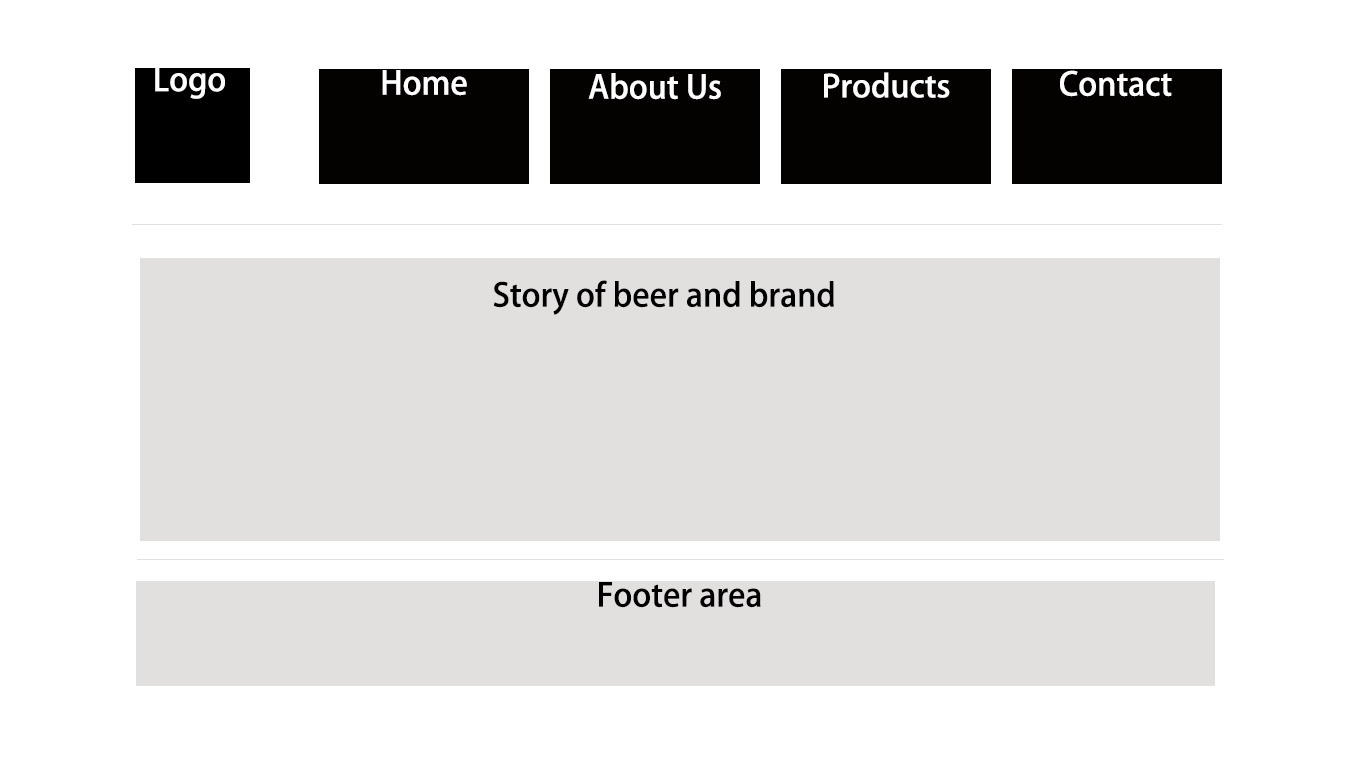
<style>
.page{position:relative;width:1366px;height:768px;background:#ffffff}
.page>*{position:absolute;margin:0}
.t1{font:32px "AdobeHeitiStd-Regular";color:#fffefe}
.t2{font:32px "AdobeHeitiStd-Regular";color:#ffffff}
.t3{font:30.7px "AdobeHeitiStd-Regular";color:#ffffff;scale:1.04 1}
.t4{font:32px "AdobeHeitiStd-Regular";color:#000000}
</style>
<div class="page">
<p class="t1" style="left:155px;top:66px;width:70px;height:33px">Logo</p>
<p class="t2" style="left:382px;top:70px;width:85px;height:26px">Home</p>
<p class="t2" style="left:588px;top:73px;width:133px;height:27px">About Us</p>
<p class="t3" style="left:824px;top:72px;width:126px;height:26px">Products</p>
<p class="t2" style="left:1060px;top:70px;width:112px;height:27px">Contact</p>
<p class="t4" style="left:493px;top:280px;width:341px;height:35px">Story of beer and brand</p>
<p class="t4" style="left:599px;top:582px;width:162px;height:26px">Footer area</p>
</div>
